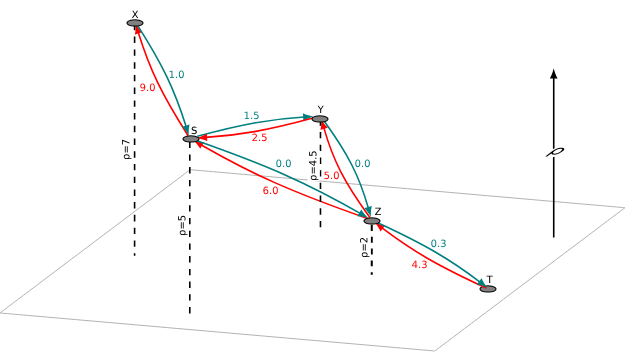
<style>
.page{position:relative;width:625px;height:352px;background:#ffffff}
.page>*{position:absolute;margin:0}
.t1{font:10px "CMR7"}
.t2{font:10px "CMR7";color:#007f7f}
.t3{font:10px "CMR7";color:#ff0000}
.t4{font:10px "CMR7";color:#0c8484}
.t5{font:10px "CMR7";color:#000000}
.t6{font:10px "CMR7";color:#ff0c0c}
.t7{font:19.6px "CMMI12";color:#000000}
.t8{font:10px "CMR7";color:#ff1010}
</style>
<div class="page">
<p class="t1" style="left:131px;top:10px;width:8px;height:8px">X</p>
<p class="t2" style="left:169px;top:70px;width:15px;height:9px">1.0</p>
<p class="t3" style="left:140px;top:83px;width:15px;height:9px">9.0</p>
<p class="t4" style="left:244px;top:111px;width:15px;height:9px">1.5</p>
<p class="t1" style="left:317px;top:105px;width:7px;height:8px">Y</p>
<p class="t5" style="left:191px;top:126px;width:6px;height:9px">S</p>
<p class="t6" style="left:252px;top:133px;width:15px;height:9px">2.5</p>
<p class="t7" style="left:545px;top:147px;width:20px;height:10px;rotate:5deg">ρ</p>
<p class="t2" style="left:276px;top:159px;width:15px;height:9px">0.0</p>
<p class="t2" style="left:355px;top:159px;width:15px;height:9px">0.0</p>
<p class="t3" style="left:324px;top:171px;width:15px;height:9px">5.0</p>
<p class="t3" style="left:263px;top:186px;width:15px;height:9px">6.0</p>
<p class="t1" style="left:375px;top:207px;width:7px;height:8px">Z</p>
<p class="t2" style="left:431px;top:239px;width:15px;height:9px">0.3</p>
<p class="t8" style="left:412px;top:260px;width:15px;height:9px">4.3</p>
<p class="t1" style="left:486px;top:275px;width:7px;height:8px">T</p>
</div>
